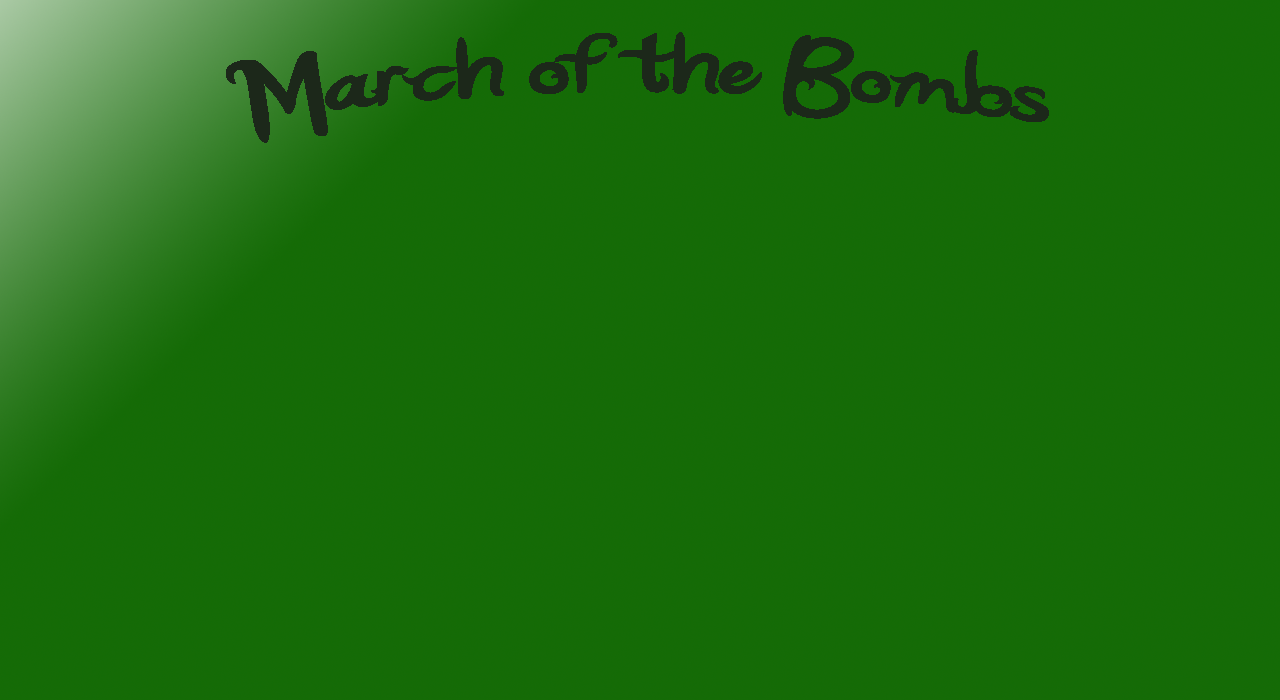
<style>
.page{position:relative;width:1280px;height:700px;background:#156b06}
.page>*{position:absolute;margin:0}
.t1{font:116.7px "KatyBerry";color:#1c281a;scale:1.3 1}
</style>
<div class="page">
<p class="t1" style="left:226px;top:32px;width:823px;height:111px">March of the Bombs</p>
</div>
